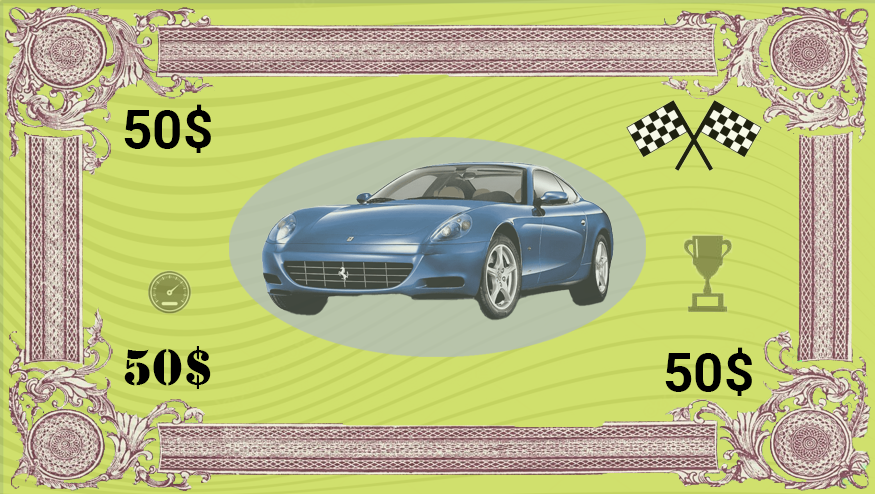
<style>
.page{position:relative;width:875px;height:494px;background:#d0e06d}
.page>*{position:absolute;margin:0}
.t1{font:53.3px "Roboto-Bold";color:#000000}
.t2{font:53.3px "Stencil";color:#000000}
</style>
<div class="page">
<p class="t1" style="left:124px;top:104px;width:87px;height:49px">50$</p>
<p class="t2" style="left:124px;top:346px;width:87px;height:43px">50$</p>
<p class="t1" style="left:665px;top:347px;width:87px;height:49px">50$</p>
</div>
